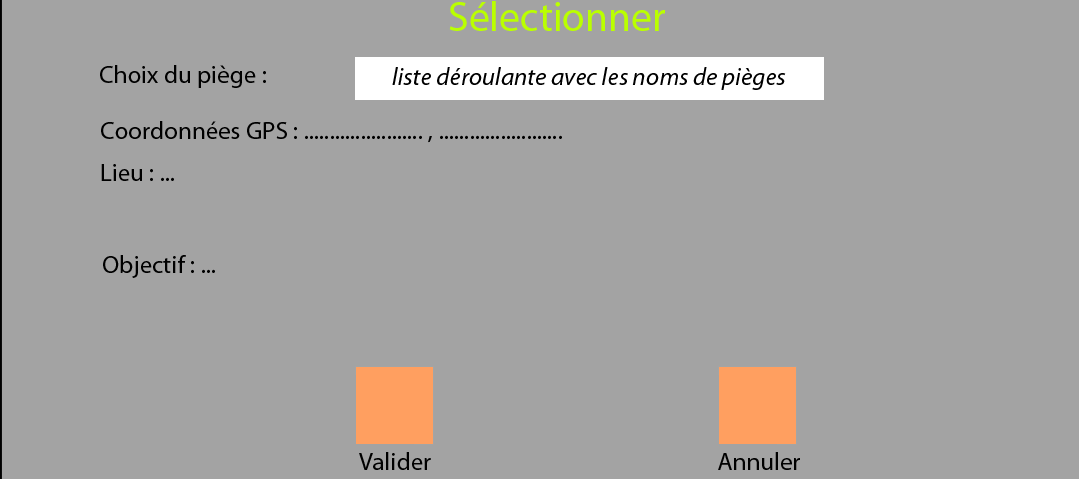
<style>
.page{position:relative;width:1079px;height:479px;background:#a3a3a3}
.page>*{position:absolute;margin:0}
.t1{font:41.7px "MyriadPro-Regular";color:#baff00}
.t2{font:25px "MyriadPro-Regular";color:#000000}
.t3{font:25px "MyriadPro-It";color:#000000}
</style>
<div class="page">
<p class="t1" style="left:449px;top:1px;width:216px;height:30px">Sélectionner</p>
<p class="t2" style="left:100px;top:65px;width:166px;height:23px">Choix du piège :</p>
<p class="t3" style="left:392px;top:67px;width:394px;height:23px">liste déroulante avec les noms de pièges</p>
<p class="t2" style="left:101px;top:121px;width:461px;height:22px">Coordonnées GPS : ....................... , ........................</p>
<p class="t2" style="left:101px;top:164px;width:73px;height:17px">Lieu : ...</p>
<p class="t2" style="left:103px;top:255px;width:112px;height:23px">Objectif : ...</p>
<p class="t2" style="left:359px;top:452px;width:72px;height:18px">Valider</p>
<p class="t2" style="left:718px;top:452px;width:82px;height:18px">Annuler</p>
</div>
